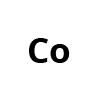
<style>
.page{position:relative;width:100px;height:100px;background:#ffffff}
.page>*{position:absolute;margin:0}
.t1{font:35px "OpenSans-Bold";color:#000000}
</style>
<div class="page">
<p class="t1" style="left:29px;top:38px;width:41px;height:25px">Co</p>
</div>
